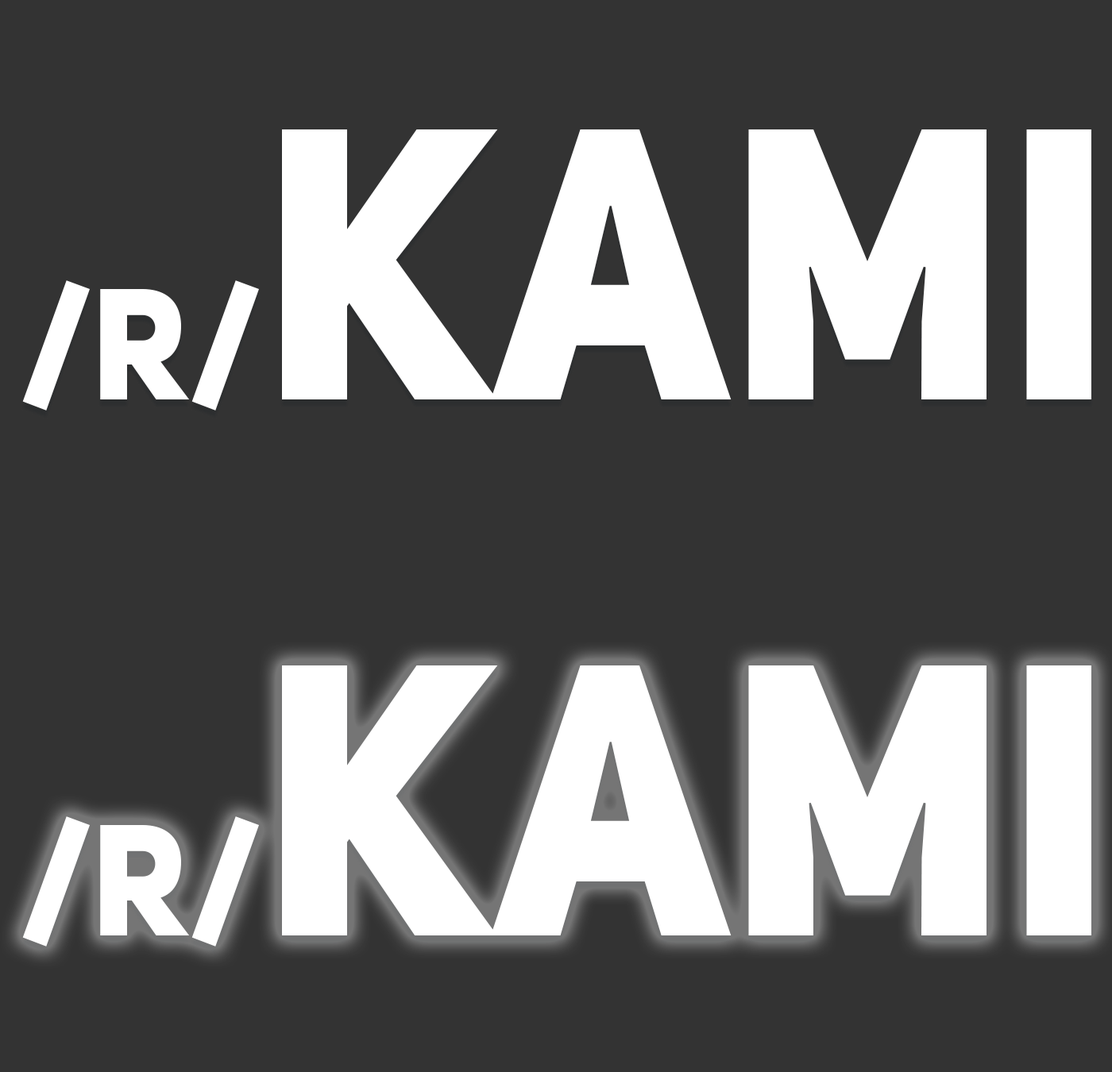
<style>
.page{position:relative;width:1112px;height:1072px;background:#333333}
.page>*{position:absolute;margin:0}
.t1{font:381.3px "UniSansHeavyCAPS";color:#ffffff;scale:0.95 1}
.t2{font:155.7px "UniSansHeavyCAPS";color:#ffffff;scale:0.95 1}
</style>
<div class="page">
<p class="t1" style="left:22px;top:129px;width:1069px;height:282px"><span class="t2">/r/</span>kami</p>
<p class="t1" style="left:22px;top:666px;width:1069px;height:281px"><span class="t2">/r/</span>KAMI</p>
</div>
